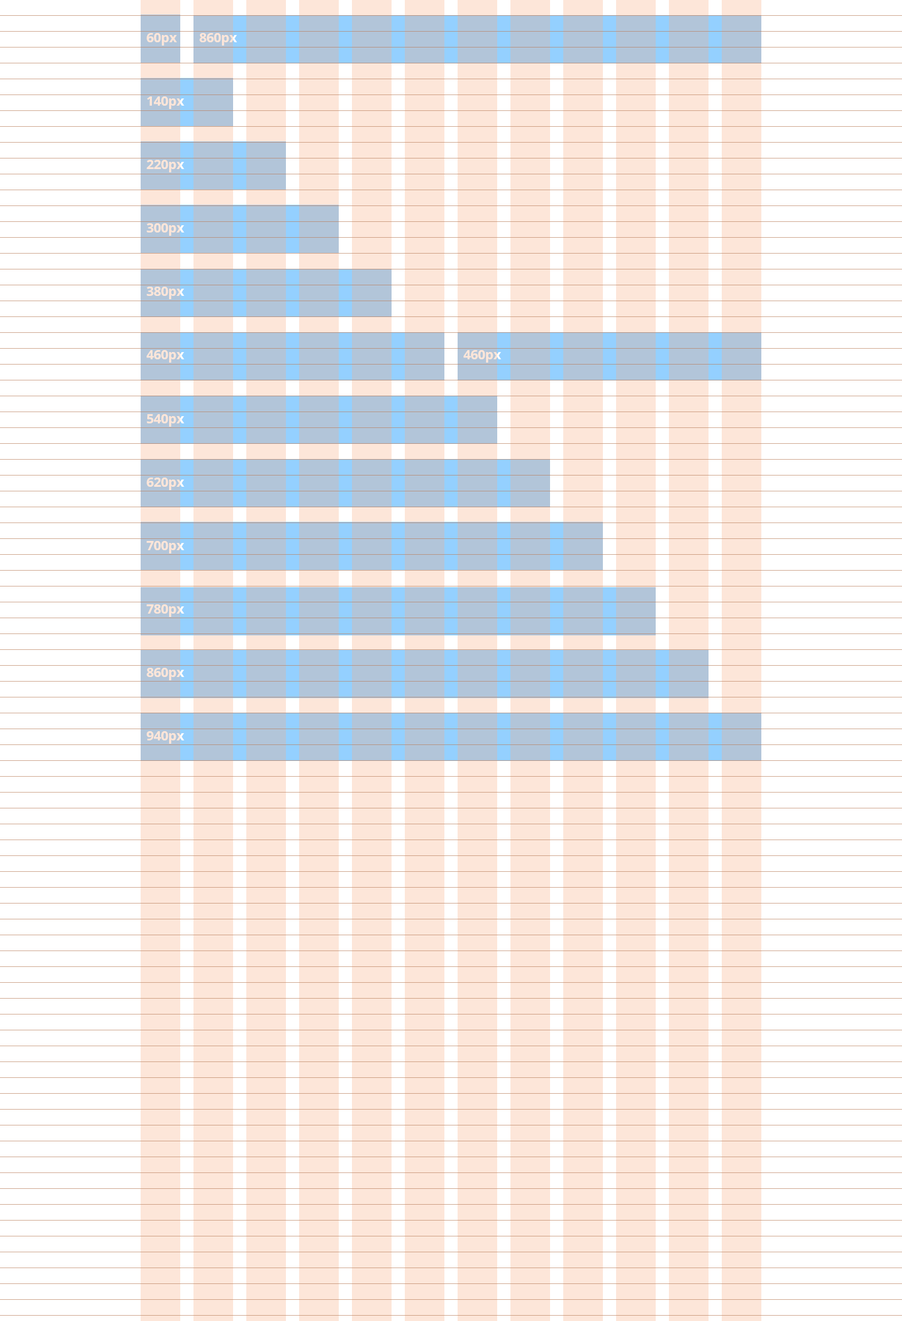
<style>
.page{position:relative;width:902px;height:1321px;background:#ffffff}
.page>*{position:absolute;margin:0}
.t1{font:13.2px "NotoSans-Bold";color:#fde6d9}
</style>
<div class="page">
<p class="t1" style="left:147px;top:33px;width:30px;height:13px">60px</p>
<p class="t1" style="left:147px;top:33px;width:30px;height:13px">60px</p>
<p class="t1" style="left:200px;top:33px;width:37px;height:13px">860px</p>
<p class="t1" style="left:147px;top:96px;width:37px;height:13px">140px</p>
<p class="t1" style="left:147px;top:160px;width:37px;height:12px">220px</p>
<p class="t1" style="left:147px;top:223px;width:37px;height:13px">300px</p>
<p class="t1" style="left:147px;top:287px;width:37px;height:12px">380px</p>
<p class="t1" style="left:147px;top:350px;width:37px;height:13px">460px</p>
<p class="t1" style="left:464px;top:350px;width:37px;height:13px">460px</p>
<p class="t1" style="left:147px;top:414px;width:37px;height:13px">540px</p>
<p class="t1" style="left:147px;top:478px;width:37px;height:12px">620px</p>
<p class="t1" style="left:147px;top:541px;width:37px;height:13px">700px</p>
<p class="t1" style="left:147px;top:605px;width:37px;height:12px">780px</p>
<p class="t1" style="left:147px;top:668px;width:37px;height:12px">860px</p>
<p class="t1" style="left:147px;top:731px;width:37px;height:13px">940px</p>
</div>
